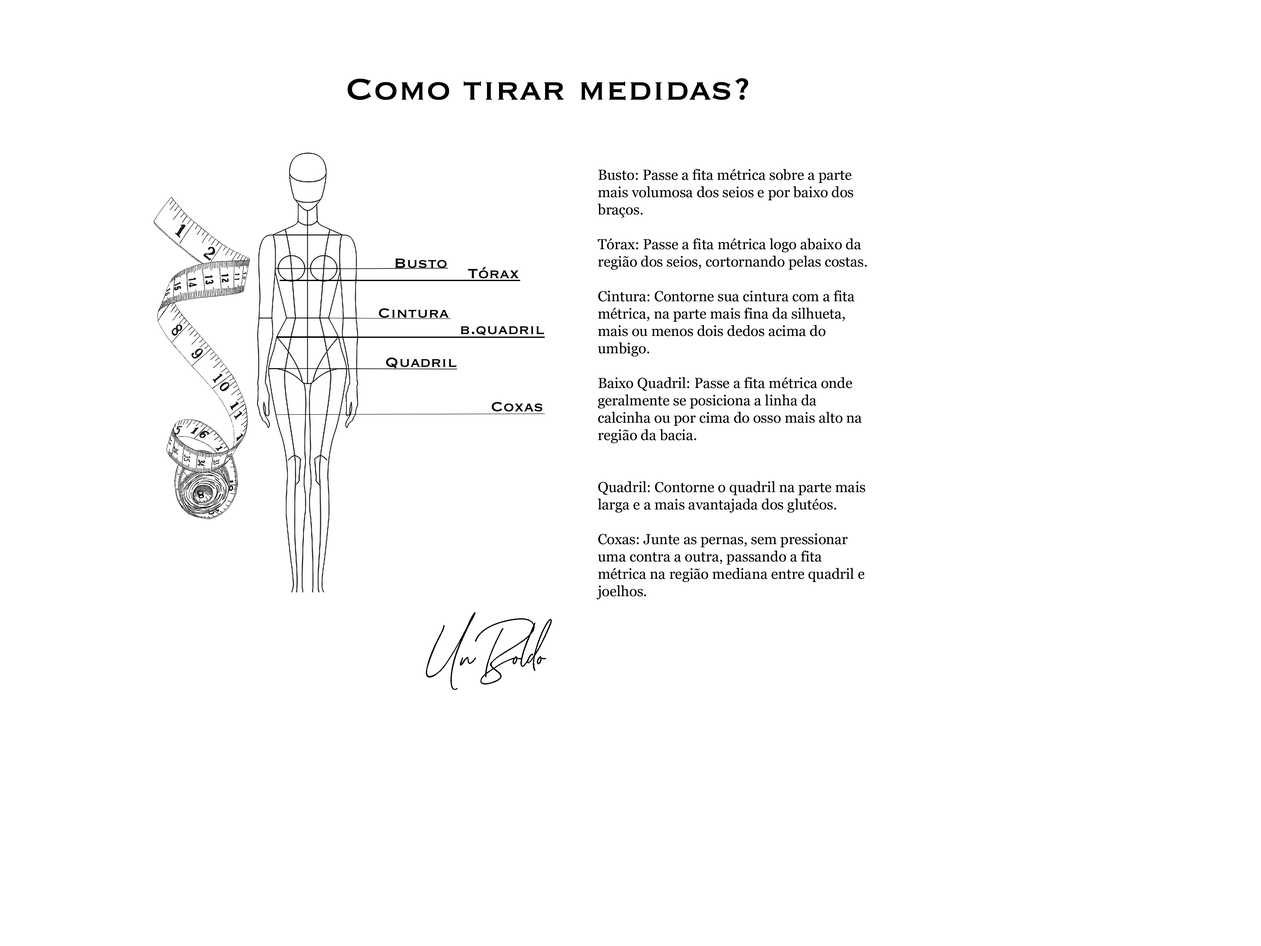
<style>
.page{position:relative;width:1261px;height:946px;background:#ffffff}
.page>*{position:absolute;margin:0}
.t1{font:39.4px "Copperplate";color:#000000}
.t2{font:14.5px "Georgia";color:#000000}
.t3{font:17.5px "Copperplate";color:#000000}
.t4{font:63.1px "KatherineFree";color:#000000}
</style>
<div class="page">
<p class="t1" style="left:347px;top:78px;width:401px;height:22px">Como tirar medidas?</p>
<p class="t2" style="left:597px;top:169px;width:270px;height:430px">Busto: Passe a fita métrica sobre a parte mais volumosa dos seios e por baixo dos braços.<br><br>Tórax: Passe a fita métrica logo abaixo da região dos seios, cortornando pelas costas.<br><br>Cintura: Contorne sua cintura com a fita métrica, na parte mais fina da silhueta, mais ou menos dois dedos acima do umbigo.<br><br>Baixo Quadril: Passe a fita métrica onde geralmente se posiciona a linha da calcinha ou por cima do osso mais alto na região da bacia.<br><br><br>Quadril: Contorne o quadril na parte mais larga e a mais avantajada dos glutéos.<br><br>Coxas: Junte as pernas, sem pressionar uma contra a outra, passando a fita métrica na região mediana entre quadril e joelhos.</p>
<p class="t3" style="left:395px;top:258px;width:52px;height:10px">Busto</p>
<p class="t3" style="left:468px;top:267px;width:51px;height:11px">Tórax</p>
<p class="t3" style="left:379px;top:308px;width:70px;height:10px">Cintura</p>
<p class="t3" style="left:461px;top:326px;width:83px;height:10px">b.quadril</p>
<p class="t3" style="left:386px;top:357px;width:71px;height:12px">Quadril</p>
<p class="t3" style="left:492px;top:402px;width:50px;height:9px">Coxas</p>
<p class="t4" style="left:426px;top:612px;width:126px;height:78px">UnBoldo</p>
</div>
